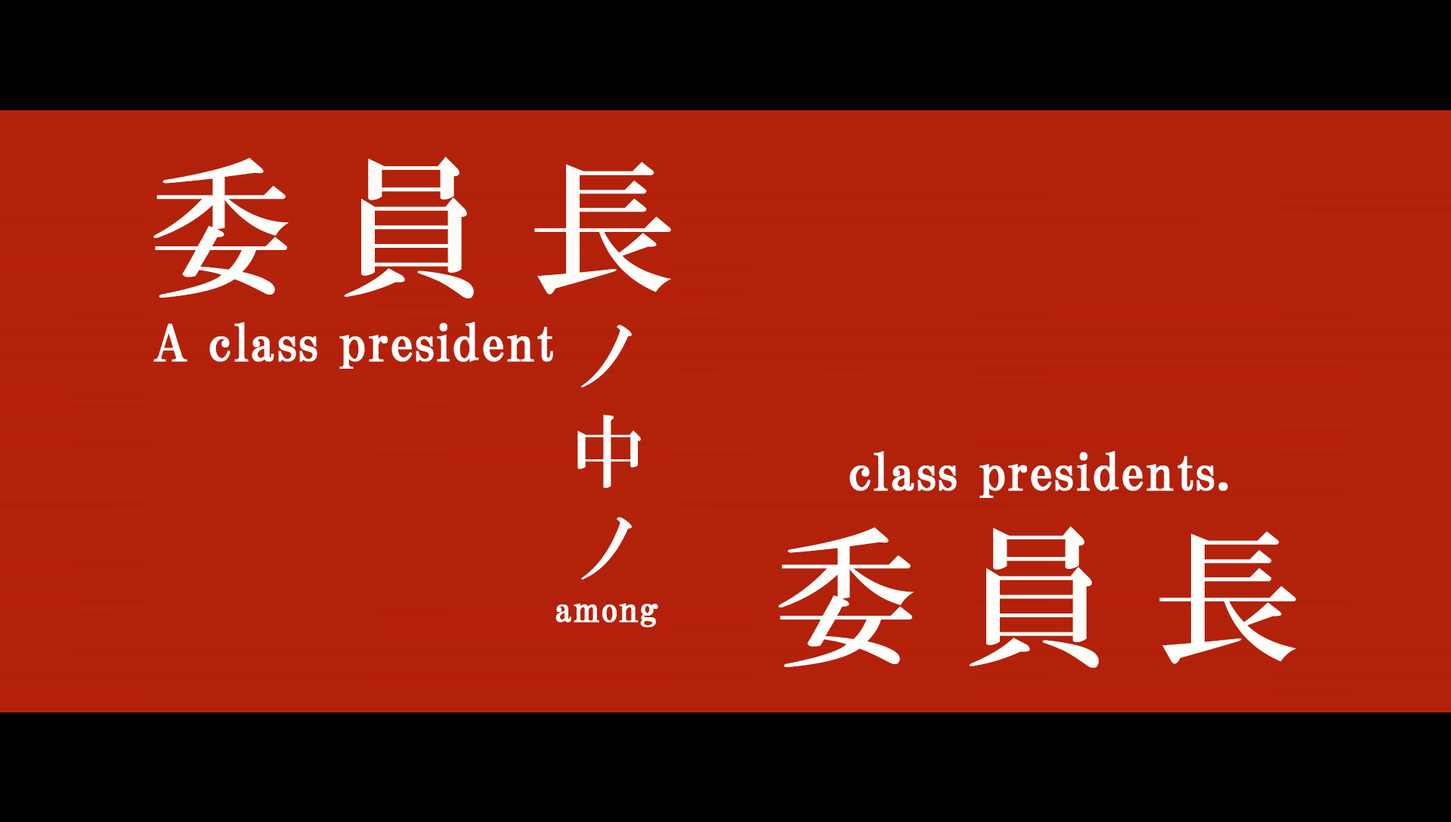
<style>
.page{position:relative;width:1451px;height:822px;background:#000000}
.page>*{position:absolute;margin:0}
.t1{font:148.8px "HGMinchoB";letter-spacing:0.29em;color:#fdfdfa}
.t2{font:50.4px "HGPMinchoB";letter-spacing:0.01em;color:#ffffff;font-weight:bold}
.t3{font:80.1px "HGMinchoB";letter-spacing:0.29em;color:#fdfdfa}
.t4{font:35.3px "HGPMinchoB";letter-spacing:0.01em;color:#ffffff;font-weight:bold}
</style>
<div class="page">
<p class="t1" style="left:153px;top:156px;width:518px;height:142px">委員長</p>
<p class="t2" style="left:153px;top:322px;width:400px;height:47px">A class president</p>
<p class="t3" style="left:577px;top:325px;width:64px;height:254px;text-align:center">ノ<br>中<br>ノ</p>
<p class="t2" style="left:849px;top:451px;width:379px;height:47px">class presidents.</p>
<p class="t1" style="left:778px;top:526px;width:518px;height:142px">委員長</p>
<p class="t4" style="left:555px;top:603px;width:103px;height:25px">among</p>
</div>
